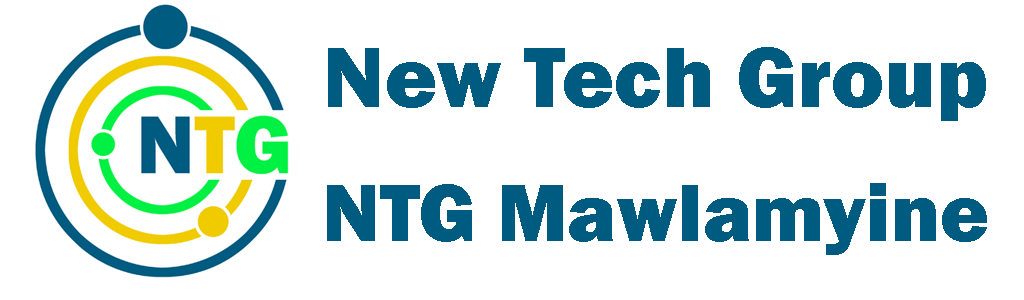
<style>
.page{position:relative;width:1024px;height:300px;background:#ffffff}
.page>*{position:absolute;margin:0}
.t1{font:88.8px/134px "FranklinGothic-Heavy";color:#005b80}
.t2{font:83.9px/134px "FranklinGothic-Heavy";color:#005b80}
</style>
<div class="page">
<p class="t1" style="left:327px;top:47px;width:660px;height:208px;text-align:center">New Tech Group<br><span class="t2">NTG Mawlamyine</span></p>
</div>
